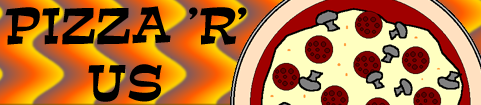
<style>
.page{position:relative;width:481px;height:105px}
.page>*{position:absolute;margin:0}
.t1{font:47.8px "ExposeNormal";color:#000000}
</style>
<div class="page">
<p class="t1" style="left:5px;top:6px;width:242px;height:96px">PIZZA 'R' <br>     US</p>
</div>
